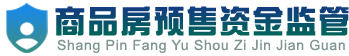
<style>
.page{position:relative;width:349px;height:56px;background:#ffffff}
.page>*{position:absolute;margin:0}
.t1{font:30px "SingYiEG-Ultra-GB";letter-spacing:0.1em;color:#09506d}
.t2{font:14px "ArialMT";letter-spacing:0.05em;color:#7f9593}
</style>
<div class="page">
<p class="t1" style="left:55px;top:6px;width:294px;height:30px">商品房预售资金监管</p>
<p class="t2" style="left:57px;top:39px;width:288px;height:14px">Shang Pin Fang Yu Shou Zi Jin Jian Guan</p>
</div>
